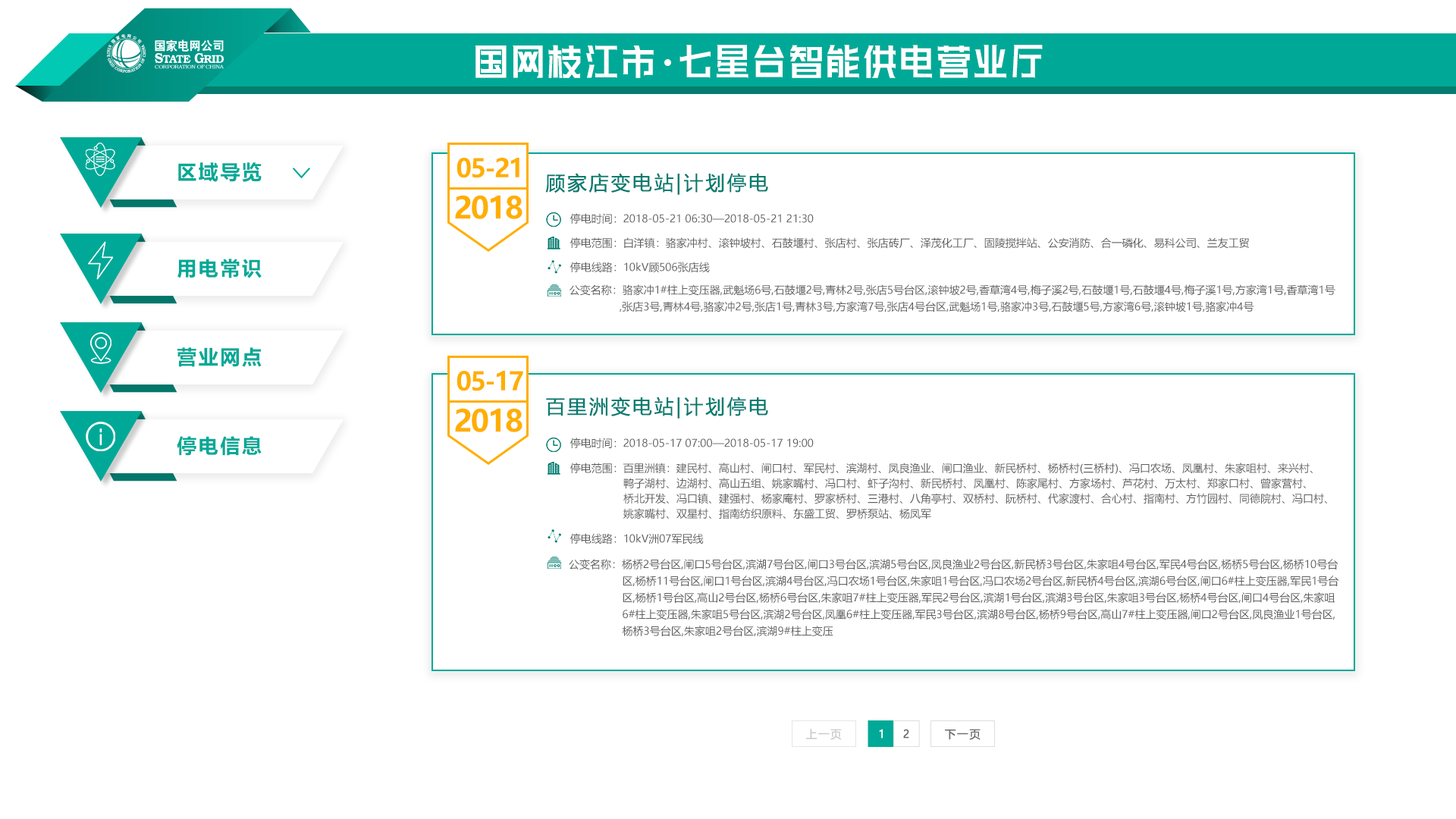
<style>
.page{position:relative;width:1456px;height:819px;background:#ffffff}
.page>*{position:absolute;margin:0}
.t1{font:54.7px "HuXiaoBoKuHei";letter-spacing:0.1em;color:#ffffff;scale:0.61 1}
.t2{font:25.2px "MicrosoftYaHei-Bold";letter-spacing:-0.05em;color:#ffae00}
.t3{font:19.7px "MicrosoftYaHei-Bold";letter-spacing:0.1em;color:#00a997}
.t4{font:19.3px "MicrosoftYaHei";letter-spacing:0.1em;color:#047c70;font-weight:bold}
.t5{font:30px "MicrosoftYaHei-Bold";letter-spacing:-0.05em;color:#ffae00}
.t6{font:10.6px "MicrosoftYaHei";color:#605f5f}
.t7{font:10.6px/16.7px "MicrosoftYaHei";color:#605f5f}
.t8{font:10.6px/15.2px "MicrosoftYaHei";color:#605f5f}
.t9{font:11px "MicrosoftYaHei";letter-spacing:0.1em;color:#cacaca;font-weight:bold}
.t10{font:11px "MicrosoftYaHei";letter-spacing:0.1em;color:#ffffff;font-weight:bold}
.t11{font:11px "MicrosoftYaHei";letter-spacing:0.1em;color:#6c6a6a;font-weight:bold}
</style>
<div class="page">
<p class="t1" style="left:475px;top:45px;width:568px;height:34px">国网枝江市 七星台智能供电营业厅</p>
<p class="t2" style="left:457px;top:158px;width:62px;height:20px">05-21</p>
<p class="t3" style="left:178px;top:162px;width:84px;height:20px">区域导览</p>
<p class="t4" style="left:545px;top:173px;width:223px;height:22px">顾家店变电站|计划停电</p>
<p class="t5" style="left:455px;top:195px;width:67px;height:24px">2018</p>
<p class="t6" style="left:570px;top:213px;width:244px;height:11px">停电时间：2018-05-21 06:30—2018-05-21 21:30</p>
<p class="t6" style="left:570px;top:237px;width:679px;height:12px">停电范围：白洋镇：骆家冲村、滚钟坡村、石鼓堰村、张店村、张店砖厂、泽茂化工厂、固陵搅拌站、公安消防、合一磷化、易科公司、兰友工贸</p>
<p class="t3" style="left:177px;top:259px;width:85px;height:19px">用电常识</p>
<p class="t6" style="left:570px;top:262px;width:140px;height:11px">停电线路：10kV顾506张店线</p>
<p class="t7" style="left:570px;top:284px;width:765px;height:28px">公变名称：骆家冲1#柱上变压器,武魁场6号,石鼓堰2号,青林2号,张店5号台区,滚钟坡2号,香草湾4号,梅子溪2号,石鼓堰1号,石鼓堰4号,梅子溪1号,方家湾1号,香草湾1号<br>                ,张店3号,青林4号,骆家冲2号,张店1号,青林3号,方家湾7号,张店4号台区,武魁场1号,骆家冲3号,石鼓堰5号,方家湾6号,滚钟坡1号,骆家冲4号</p>
<p class="t3" style="left:177px;top:347px;width:85px;height:20px">营业网点</p>
<p class="t2" style="left:457px;top:371px;width:66px;height:20px">05-17</p>
<p class="t4" style="left:546px;top:397px;width:222px;height:22px">百里洲变电站|计划停电</p>
<p class="t5" style="left:455px;top:408px;width:67px;height:24px">2018</p>
<p class="t3" style="left:177px;top:436px;width:85px;height:20px">停电信息</p>
<p class="t6" style="left:570px;top:438px;width:244px;height:10px">停电时间：2018-05-17 07:00—2018-05-17 19:00</p>
<p class="t8" style="left:570px;top:463px;width:757px;height:56px">停电范围：百里洲镇：建民村、高山村、闸口村、军民村、滨湖村、凤良渔业、闸口渔业、新民桥村、杨桥村(三桥村)、冯口农场、凤凰村、朱家咀村、来兴村、<br>                 鸭子湖村、边湖村、高山五组、姚家嘴村、冯口村、虾子沟村、新民桥村、凤凰村、陈家尾村、方家场村、芦花村、万太村、郑家口村、曾家营村、<br>                 桥北开发、冯口镇、建强村、杨家庵村、罗家桥村、三港村、八角亭村、双桥村、阮桥村、代家渡村、合心村、指南村、方竹园村、同德院村、冯口村、<br>                 姚家嘴村、双星村、指南纺织原料、东盛工贸、罗桥泵站、杨凤军</p>
<p class="t6" style="left:570px;top:533px;width:134px;height:11px">停电线路：10kV洲07军民线</p>
<p class="t7" style="left:569px;top:559px;width:770px;height:77px">公变名称：杨桥2号台区,闸口5号台区,滨湖7号台区,闸口3号台区,滨湖5号台区,凤良渔业2号台区,新民桥3号台区,朱家咀4号台区,军民4号台区,杨桥5号台区,杨桥10号台 <br>                 区,杨桥11号台区,闸口1号台区,滨湖4号台区,冯口农场1号台区,朱家咀1号台区,冯口农场2号台区,新民桥4号台区,滨湖6号台区,闸口6#柱上变压器,军民1号台<br>                 区,杨桥1号台区,高山2号台区,杨桥6号台区,朱家咀7#柱上变压器,军民2号台区,滨湖1号台区,滨湖3号台区,朱家咀3号台区,杨桥4号台区,闸口4号台区,朱家咀<br>                 6#柱上变压器,朱家咀5号台区,滨湖2号台区,凤凰6#柱上变压器,军民3号台区,滨湖8号台区,杨桥9号台区,高山7#柱上变压器,闸口2号台区,凤良渔业1号台区,  <br>                 杨桥3号台区,朱家咀2号台区,滨湖9#柱上变压</p>
<p class="t9" style="left:806px;top:729px;width:36px;height:11px">上一页</p>
<p class="t10" style="left:879px;top:729px;width:4px;height:10px">1</p>
<p class="t11" style="left:903px;top:729px;width:6px;height:10px">2</p>
<p class="t11" style="left:945px;top:729px;width:36px;height:11px">下一页</p>
</div>
